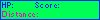
<style>
.page{position:relative;width:100px;height:20px;background:#00ff54}
.page>*{position:absolute;margin:0}
.t1{font:8px "Small Fonts";letter-spacing:0.05em;color:#0012ff}
.t2{font:8px "Small Fonts";letter-spacing:0.05em;color:#001efe}
.t3{font:8px "Small Fonts";letter-spacing:0.05em;color:#ff00cc}
</style>
<div class="page">
<p class="t1" style="left:2px;top:2px;width:11px;height:6px">HP:</p>
<p class="t2" style="left:35px;top:2px;width:24px;height:6px">Score:</p>
<p class="t3" style="left:2px;top:11px;width:36px;height:6px">Distance:</p>
</div>
